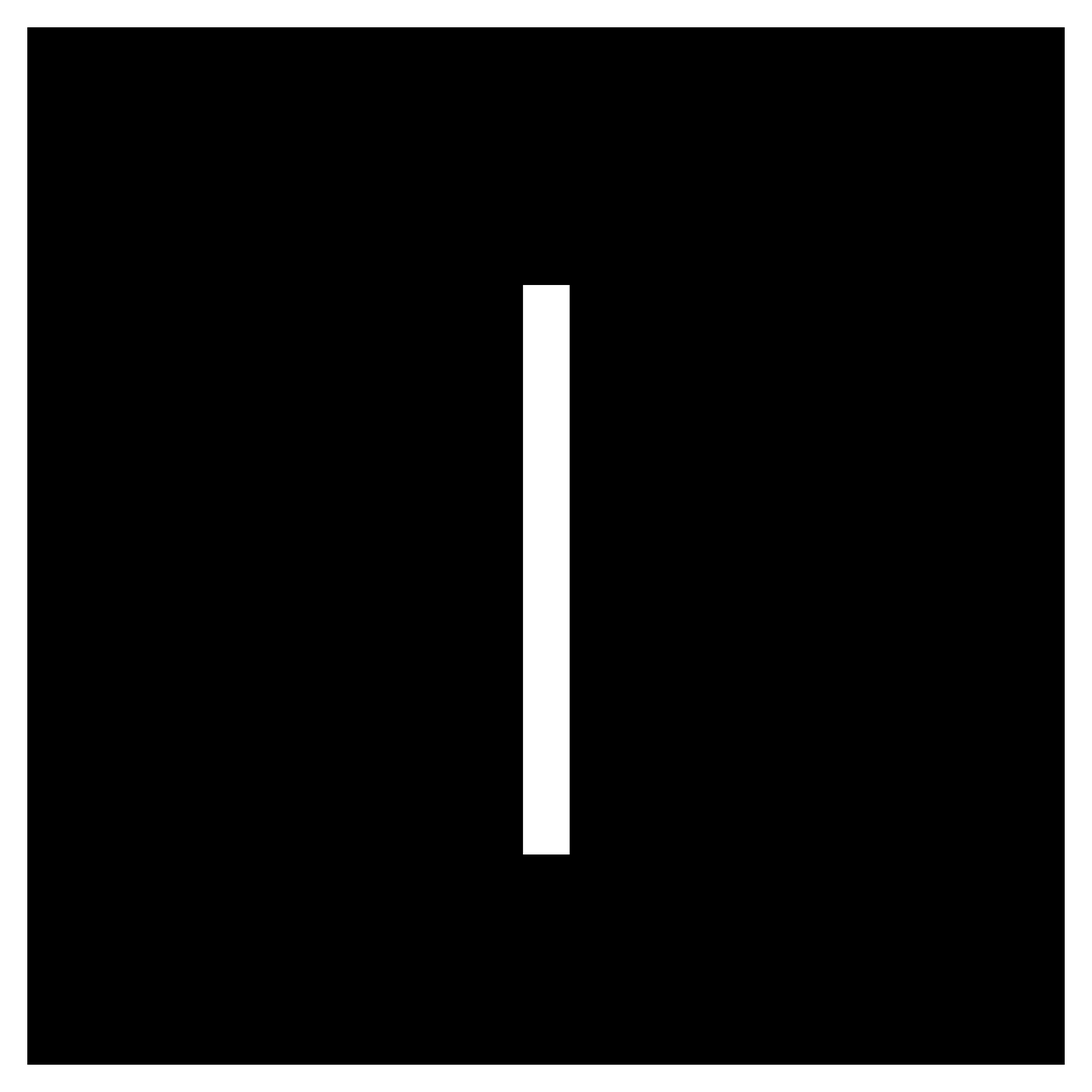
<style>
.page{position:relative;width:1092px;height:1092px;background:#000000}
.page>*{position:absolute;margin:0}
.t1{font:606.7px "ArialMT";color:#ffffff}
</style>
<div class="page">
<p class="t1" style="left:523px;top:285px;width:47px;height:569px">|</p>
</div>
